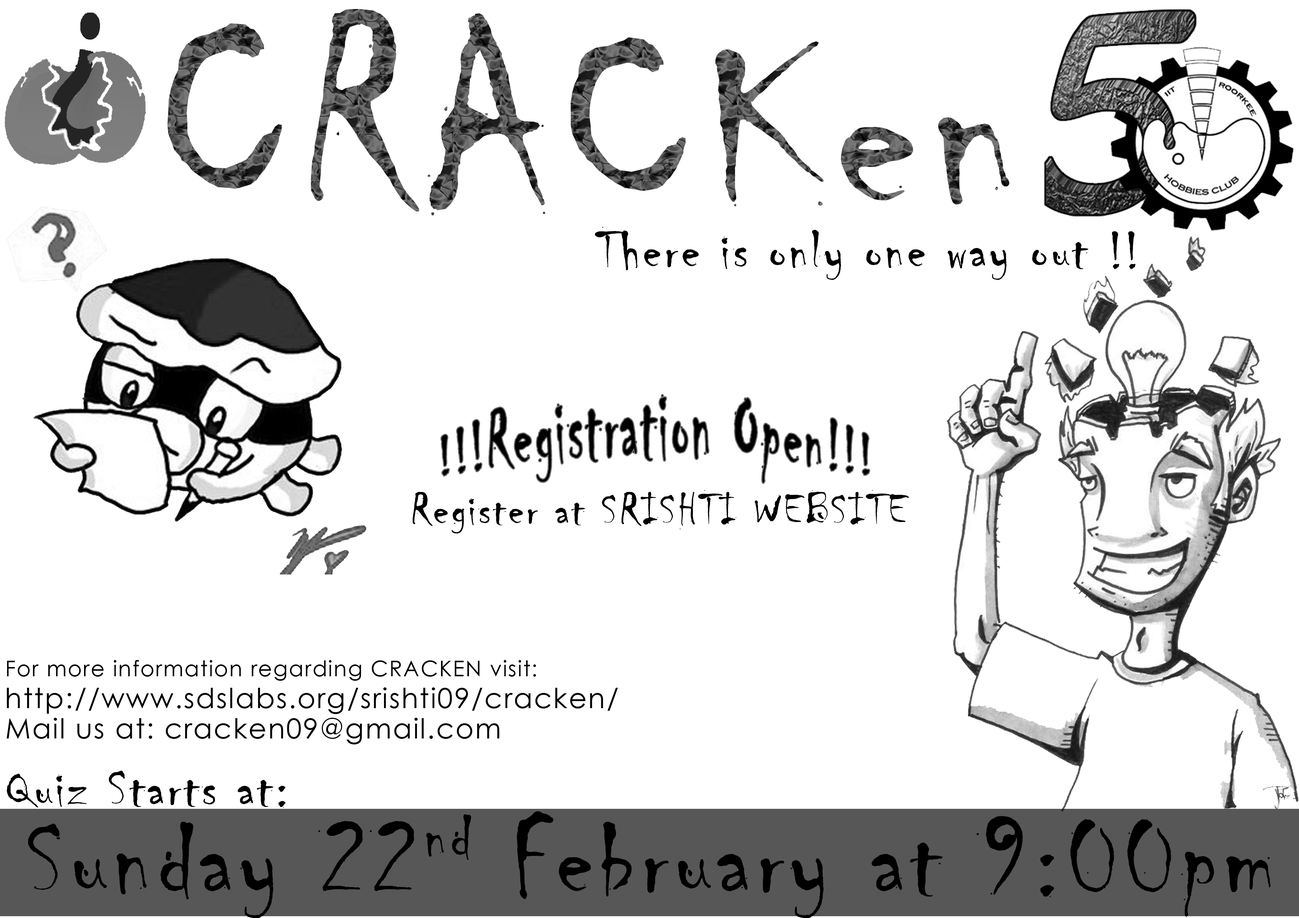
<style>
.page{position:relative;width:1299px;height:918px;background:#ffffff}
.page>*{position:absolute;margin:0}
.t1{font:265.3px "Chiller-Regular";letter-spacing:0.05em;scale:0.95 1}
.t2{font:55.5px "Chiller-Regular";letter-spacing:0.05em;color:#000000}
.t3{font:46.3px "Chiller-Regular";letter-spacing:0.05em;color:#000000}
.t4{font:21.6px "CenturyGothic";letter-spacing:0.05em;color:#000000}
.t5{font:27.8px "CenturyGothic";letter-spacing:0.05em;color:#000000}
.t6{font:111.1px "Chiller-Regular";letter-spacing:0.05em;color:#000000}
</style>
<div class="page">
<p class="t1" style="left:167px;top:9px;width:842px;height:207px">CRACKen</p>
<p class="t2" style="left:595px;top:227px;width:540px;height:53px">There is only one way out !!</p>
<p class="t2" style="left:441px;top:395px;width:428px;height:88px">!!!Registration Open!!!</p>
<p class="t3" style="left:412px;top:490px;width:497px;height:43px">Register at SRISHTI WEBSITE</p>
<p class="t4" style="left:7px;top:660px;width:529px;height:21px">For more information regarding CRACKEN visit:</p>
<p class="t5" style="left:7px;top:688px;width:611px;height:26px">http://www.sdslabs.org/srishti09/cracken/</p>
<p class="t5" style="left:7px;top:718px;width:492px;height:27px">Mail us at: cracken09@gmail.com</p>
<p class="t2" style="left:7px;top:771px;width:278px;height:37px">Quiz Starts at:</p>
<p class="t6" style="left:28px;top:811px;width:1243px;height:108px">Sunday 22nd February at 9:00pm</p>
</div>
